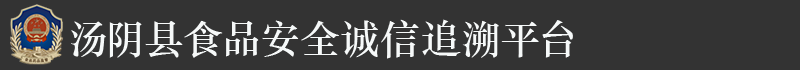
<style>
.page{position:relative;width:800px;height:70px;background:#333333}
.page>*{position:absolute;margin:0}
.t1{font:40px "STZhongsong";letter-spacing:0.05em;color:#f6f9f9}
</style>
<div class="page">
<p class="t1" style="left:71px;top:19px;width:502px;height:40px">汤阴县食品安全诚信追溯平台</p>
</div>
